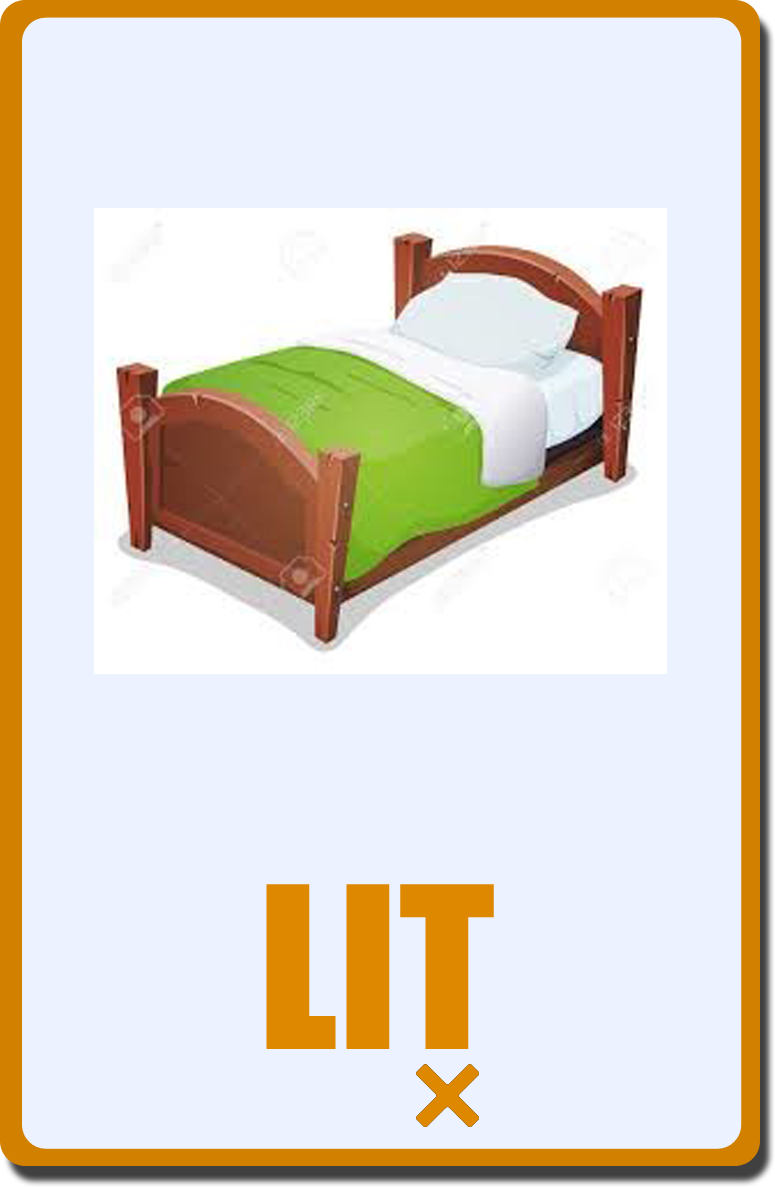
<style>
.page{position:relative;width:775px;height:1187px;background:#ecf2ff}
.page>*{position:absolute;margin:0}
.t1{font:208.3px "Impact";letter-spacing:0.005em;color:#de8800}
</style>
<div class="page">
<p class="t1" style="left:266px;top:884px;width:228px;height:165px">LIT</p>
</div>
